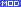
<style>
.page{position:relative;width:21px;height:7px;background:#4653e1}
.page>*{position:absolute;margin:0}
.t1{font:8px "5x5-Pixel";color:#f8fff9}
</style>
<div class="page">
<p class="t1" style="left:2px;top:1px;width:17px;height:5px">mod</p>
</div>
